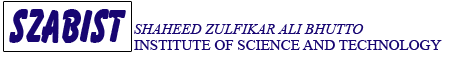
<style>
.page{position:relative;width:449px;height:66px;background:#ffffff}
.page>*{position:absolute;margin:0}
.t1{font:46.1px "Bazooka-Regular";color:#170572;scale:0.76 1}
.t2{font:15px "TimesNewRomanPS-ItalicMT";color:#170572}
.t3{font:15px "TimesNewRomanPSMT";color:#170572}
</style>
<div class="page">
<p class="t1" style="left:9px;top:9px;width:117px;height:34px">SZABIST</p>
<p class="t2" style="left:134px;top:24px;width:230px;height:10px">SHAHEED ZULFIKAR ALI BHUTTO</p>
<p class="t3" style="left:134px;top:40px;width:308px;height:10px">INSTITUTE OF SCIENCE AND TECHNOLOGY</p>
</div>
